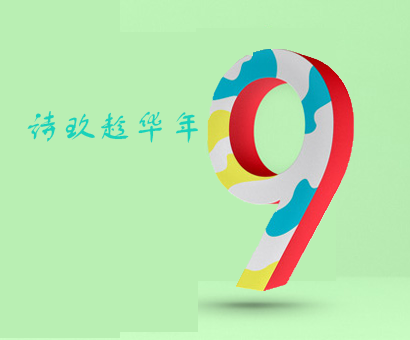
<style>
.page{position:relative;width:410px;height:340px;background:#b9efb3}
.page>*{position:absolute;margin:0}
.t1{font:36px "FZSTK--GBK1-0";color:#18d2ba}
</style>
<div class="page">
<p class="t1" style="left:27px;top:111px;width:171px;height:32px">诗玖趁华年</p>
</div>
